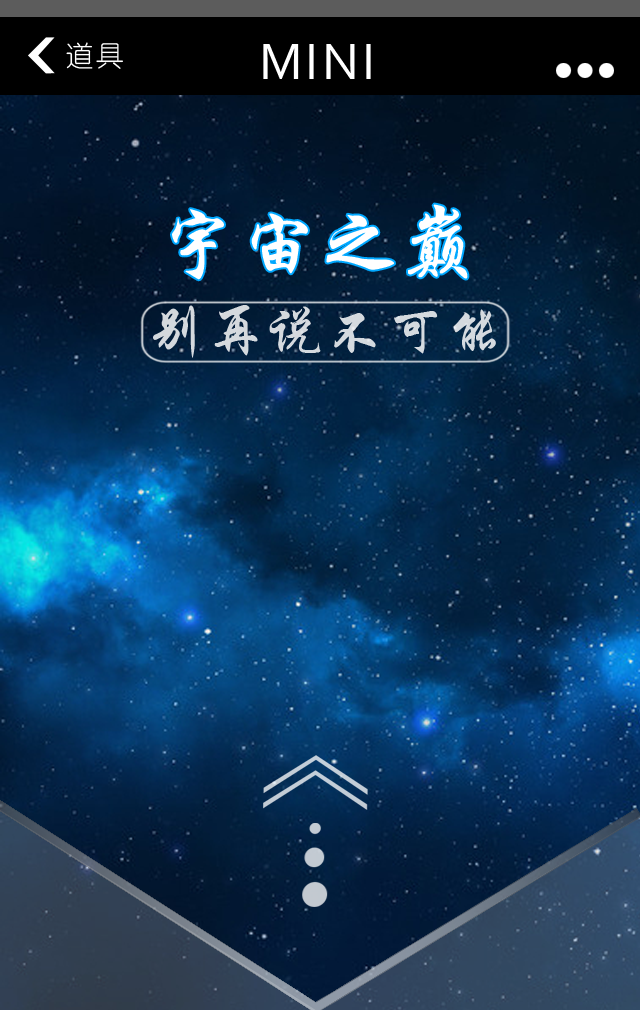
<style>
.page{position:relative;width:640px;height:1010px}
.page>*{position:absolute;margin:0}
.t1{font:28.4px "YouYuan";letter-spacing:0.06em;color:#ffffff}
.t2{font:53.2px "Corbel";letter-spacing:0.06em;color:#ffffff}
.t3{font:76.1px "STXingkai";letter-spacing:0.06em;color:#ffffff}
.t4{font:56.1px "STXingkai";letter-spacing:0.06em;color:#d4d9de}
</style>
<div class="page">
<p class="t1" style="left:66px;top:42px;width:57px;height:27px">道具</p>
<p class="t2" style="left:263px;top:44px;width:108px;height:35px">MINI</p>
<p class="t3" style="left:172px;top:204px;width:296px;height:76px">宇宙之巅</p>
<p class="t4" style="left:153px;top:305px;width:343px;height:53px">别再说不可能</p>
</div>
